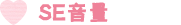
<style>
.page{position:relative;width:181px;height:25px;background:#ffffff}
.page>*{position:absolute;margin:0}
.t1{font:21.2px "shetumodengxiaofangti";color:#ef8299;font-weight:bold}
</style>
<div class="page">
<p class="t1" style="left:38px;top:2px;width:70px;height:20px">SE音量</p>
</div>
